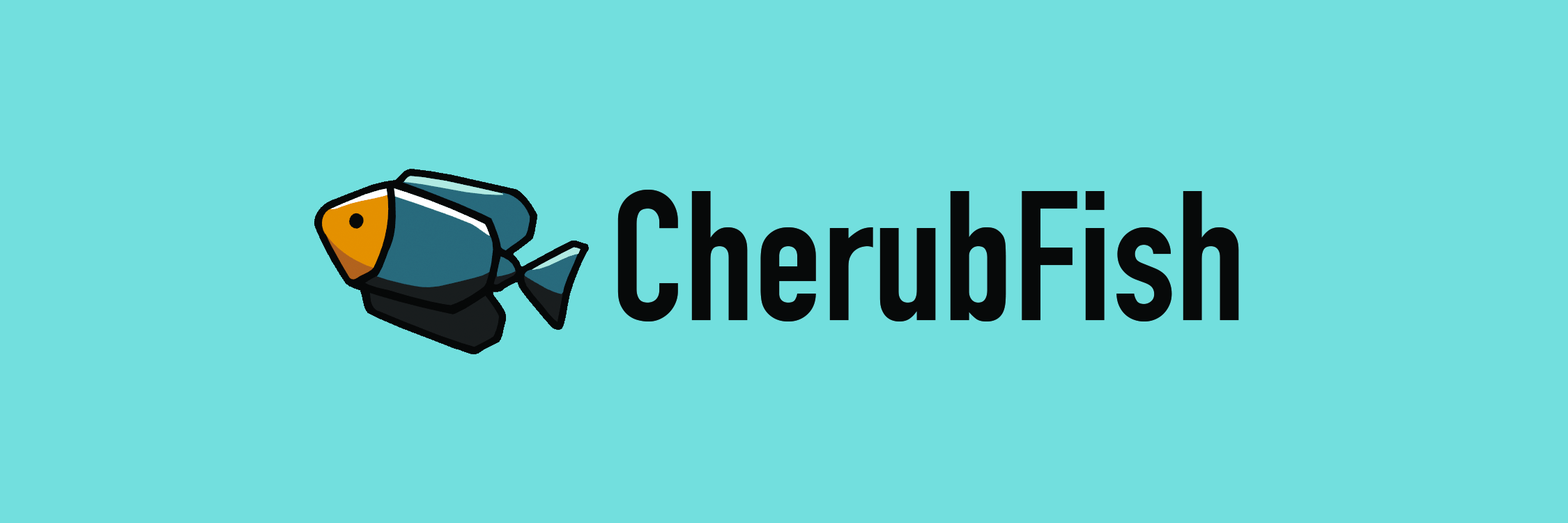
<style>
.page{position:relative;width:1568px;height:523px;background:#72dfde}
.page>*{position:absolute;margin:0}
.t1{font:181.2px "DINCondensed-Bold";color:#070909}
</style>
<div class="page">
<p class="t1" style="left:617px;top:190px;width:622px;height:131px">CherubFish</p>
</div>
